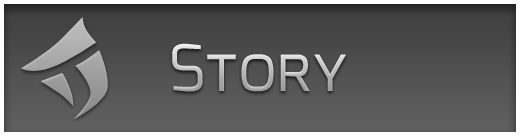
<style>
.page{position:relative;width:520px;height:136px}
.page>*{position:absolute;margin:0}
.t1{font:64px "Exo-Regular";font-variant:small-caps}
</style>
<div class="page">
<p class="t1" style="left:172px;top:43px;width:174px;height:49px">Story</p>
</div>
